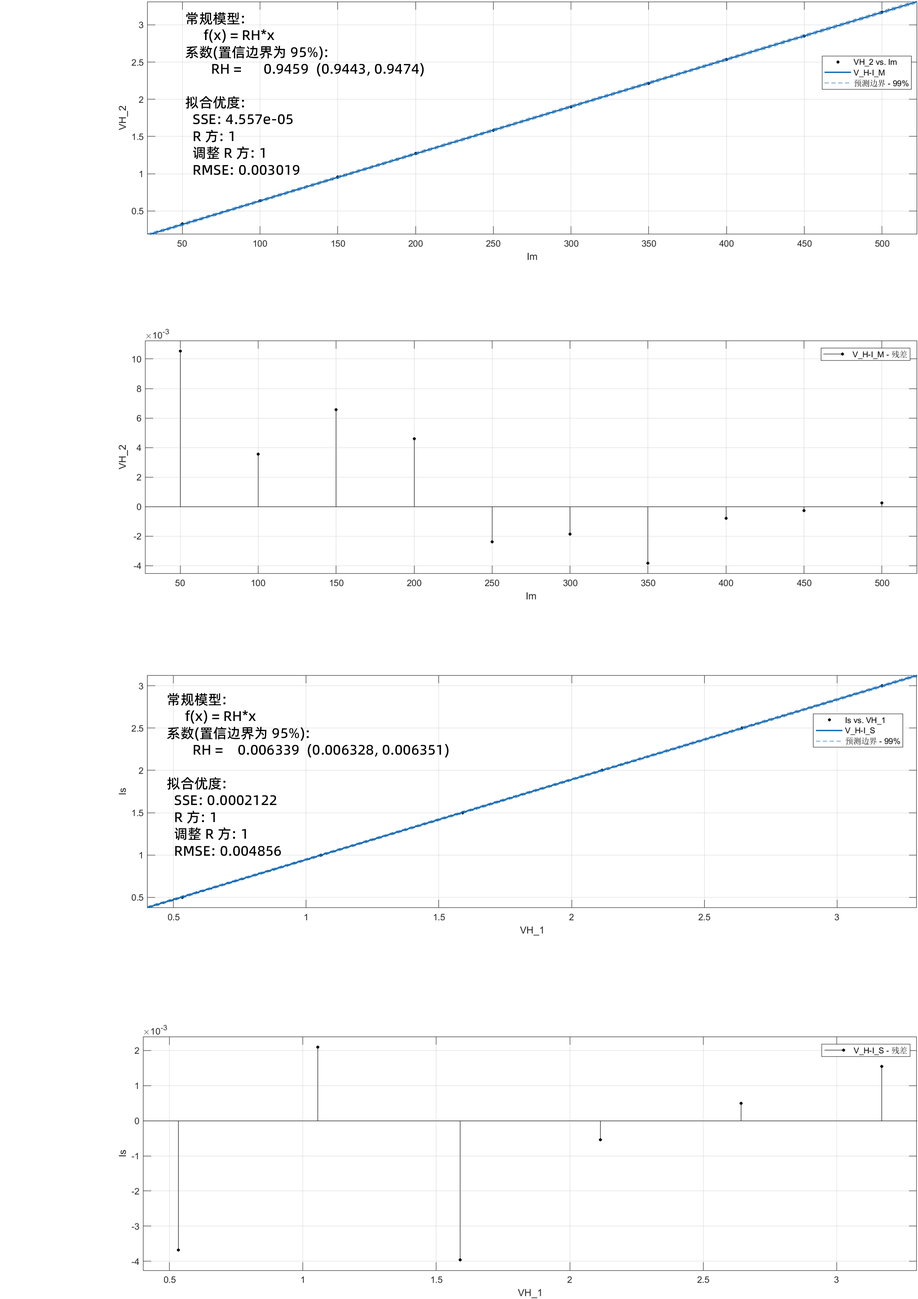
<style>
.page{position:relative;width:918px;height:1299px;background:#ffffff}
.page>*{position:absolute;margin:0}
.t1{font:14px "AlibabaPuHuiTi_2_65_Medium";color:#000000}
</style>
<div class="page">
<p class="t1" style="left:185px;top:12px;width:239px;height:163px">常规模型:<br>     f(x) = RH*x<br>系数(置信边界为 95%):<br>       RH =      0.9459  (0.9443, 0.9474)<br><br>拟合优度:<br>  SSE: 4.557e-05<br>  R 方: 1<br>  调整 R 方: 1<br>  RMSE: 0.003019</p>
<p class="t1" style="left:167px;top:693px;width:282px;height:163px">常规模型:<br>     f(x) = RH*x<br>系数(置信边界为 95%):<br>       RH =    0.006339  (0.006328, 0.006351)<br><br>拟合优度:<br>  SSE: 0.0002122<br>  R 方: 1<br>  调整 R 方: 1<br>  RMSE: 0.004856</p>
</div>
